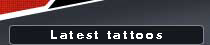
<style>
.page{position:relative;width:210px;height:45px}
.page>*{position:absolute;margin:0}
.t1{font:12px "HeliosBlack";letter-spacing:0.14em;color:#ffffff}
</style>
<div class="page">
<p class="t1" style="left:51px;top:30px;width:111px;height:9px">Latest tattoos</p>
</div>
